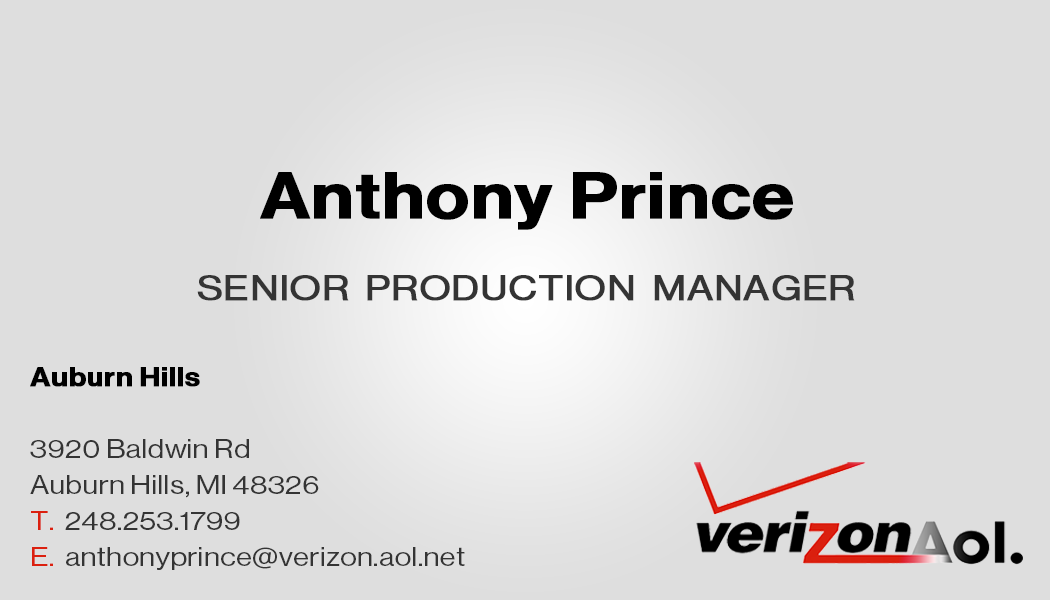
<style>
.page{position:relative;width:1050px;height:600px;background:#dedede}
.page>*{position:absolute;margin:0}
.t1{font:64.4px "NHaasGroteskDSPro-65Md";letter-spacing:0.01em;color:#000000;font-weight:bold;scale:1.15 1}
.t2{font:34.8px "NHaasGroteskDSPro-55Rg";letter-spacing:0.01em;color:#343434;font-weight:bold;scale:1.15 1}
.t3{font:26.1px "NHaasGroteskDSPro-55Rg";letter-spacing:0.01em;color:#343434;scale:1.15 1}
.t4{font:26.1px "NHaasGroteskDSPro-65Md";letter-spacing:0.01em;color:#000000;font-weight:bold;scale:1.15 1}
.t5{font:26.1px "NHaasGroteskDSPro-55Rg";letter-spacing:0.01em;color:#db200f;scale:1.15 1}
</style>
<div class="page">
<p class="t1" style="left:260px;top:172px;width:533px;height:58px">Anthony Prince</p>
<p class="t2" style="left:197px;top:275px;width:658px;height:26px">SENIOR  PRODUCTION  MANAGER</p>
<p class="t3" style="left:30px;top:367px;width:435px;height:203px"><span class="t4">Auburn Hills<br><br></span>3920 Baldwin Rd<br>Auburn Hills, MI 48326<br><span class="t5">T.  </span>248.253.1799<br><span class="t5">E.  </span>anthonyprince@verizon.aol.net</p>
</div>
